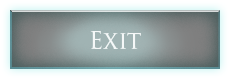
<style>
.page{position:relative;width:230px;height:79px}
.page>*{position:absolute;margin:0}
.t1{font:24px "TrajanPro3-Regular";color:#f1f1f1}
</style>
<div class="page">
<p class="t1" style="left:90px;top:31px;width:51px;height:18px">Exit</p>
</div>
